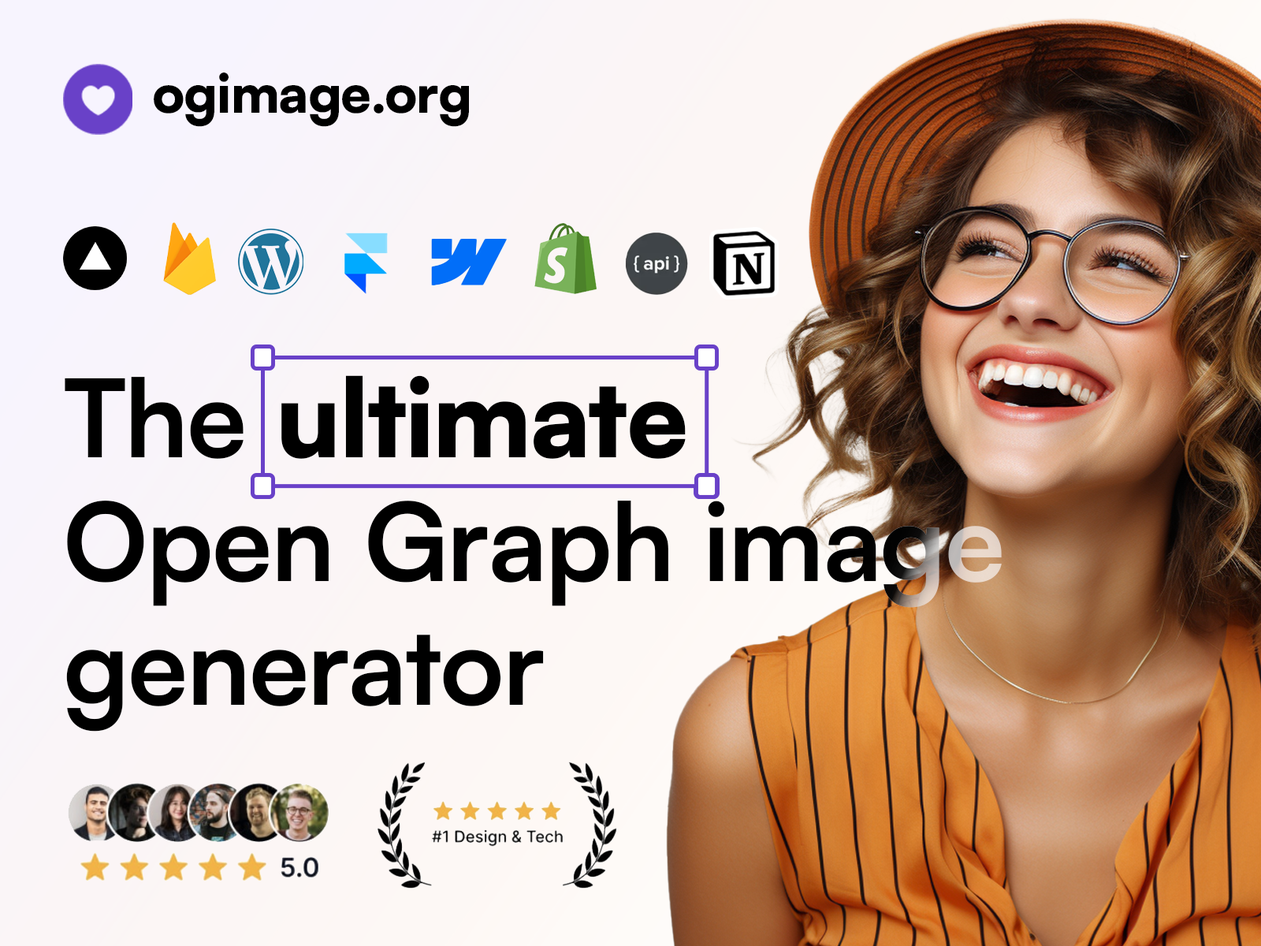
<style>
.page{position:relative;width:1261px;height:946px}
.page>*{position:absolute;margin:0}
.t1{font:53.4px "SatoshiVariable-Bold";color:#000000}
.t2{font:108px/123.7px "SatoshiVariable-Bold";color:#000000}
</style>
<div class="page">
<p class="t1" style="left:154px;top:73px;width:315px;height:54px">ogimage.org</p>
<p class="t2" style="left:65px;top:375px;width:937px;height:356px">The ultimate<br>Open Graph image<br>generator</p>
<p class="t2" style="left:65px;top:375px;width:937px;height:356px">The ultimate<br>Open Graph image<br>generator</p>
</div>
